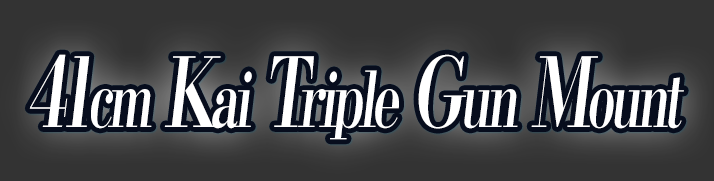
<style>
.page{position:relative;width:714px;height:181px;background:#333333}
.page>*{position:absolute;margin:0}
.t1{font:76.8px "KochoStd-Heavy";letter-spacing:-0.08em;color:#ffffff;font-style:italic;scale:0.67 1}
.t2{font:96px "KochoStd-Heavy";letter-spacing:-0.08em;color:#ffffff;font-style:italic;scale:0.67 1}
</style>
<div class="page">
<p class="t1" style="left:29px;top:54px;width:655px;height:86px"><span class="t2">41</span>cm<span class="t2"> K</span>ai<span class="t2"> T</span>riple<span class="t2"> G</span>un<span class="t2"> M</span>ount</p>
</div>
